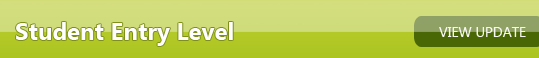
<style>
.page{position:relative;width:539px;height:58px}
.page>*{position:absolute;margin:0}
.t1{font:24px "SegoeUI-Bold";color:#fefefe}
.t2{font:14px "SegoeUI";color:#f6f7f1}
</style>
<div class="page">
<p class="t1" style="left:16px;top:22px;width:217px;height:24px">Student Entry Level</p>
<p class="t2" style="left:439px;top:27px;width:87px;height:10px">VIEW UPDATE</p>
</div>
